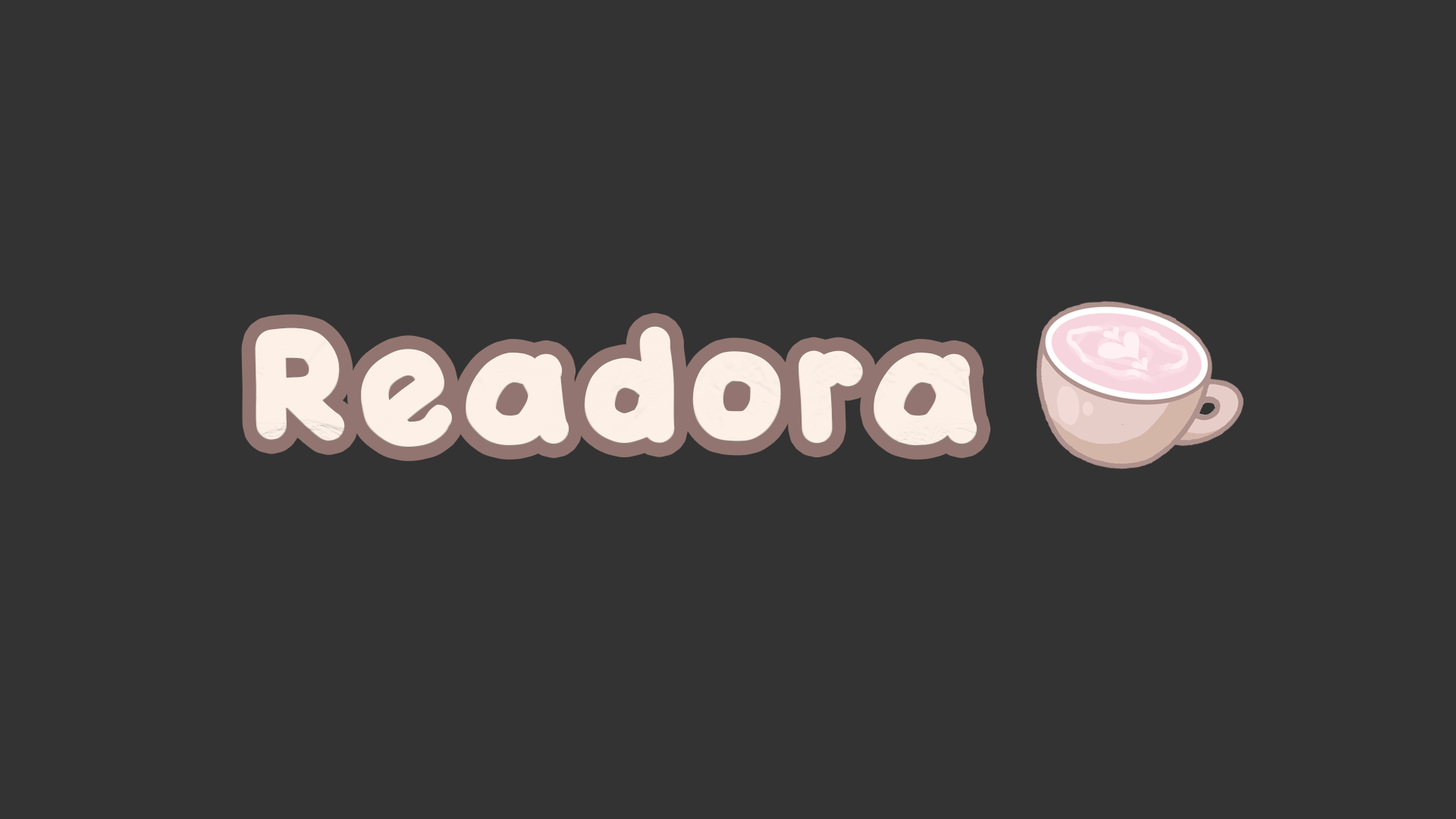
<style>
.page{position:relative;width:1456px;height:819px;background:#333333}
.page>*{position:absolute;margin:0}
.t1{font:151.7px "Pedagogique-Bold-Regular";letter-spacing:0.025em;color:#fcf0e7}
</style>
<div class="page">
<p class="t1" style="left:255px;top:326px;width:722px;height:121px">Readora</p>
</div>
